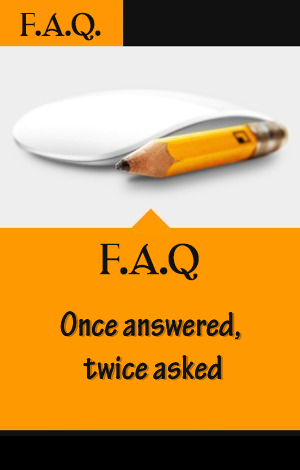
<style>
.page{position:relative;width:300px;height:470px;background:#fe9901}
.page>*{position:absolute;margin:0}
.t1{font:36px "Twilight-NewMoon";color:#111111;font-weight:bold}
.t2{font:48px "Twilight-NewMoon";color:#111111;font-weight:bold}
.t3{font:36px "TektonPro-BoldCond";color:#111111}
.t4{font:36px "TektonPro-BoldCond"}
</style>
<div class="page">
<p class="t1" style="left:20px;top:12px;width:81px;height:29px">F.A.Q.</p>
<p class="t2" style="left:100px;top:243px;width:99px;height:38px">F.A.Q</p>
<p class="t3" style="left:60px;top:311px;width:180px;height:69px;text-align:center">Once answered, <br>twice asked</p>
<p class="t3" style="left:60px;top:311px;width:180px;height:69px;text-align:center">Once answered, <br>twice asked</p>
<p class="t4" style="left:62px;top:312px;width:180px;height:69px;text-align:center">Once answered, <br>twice asked</p>
</div>
